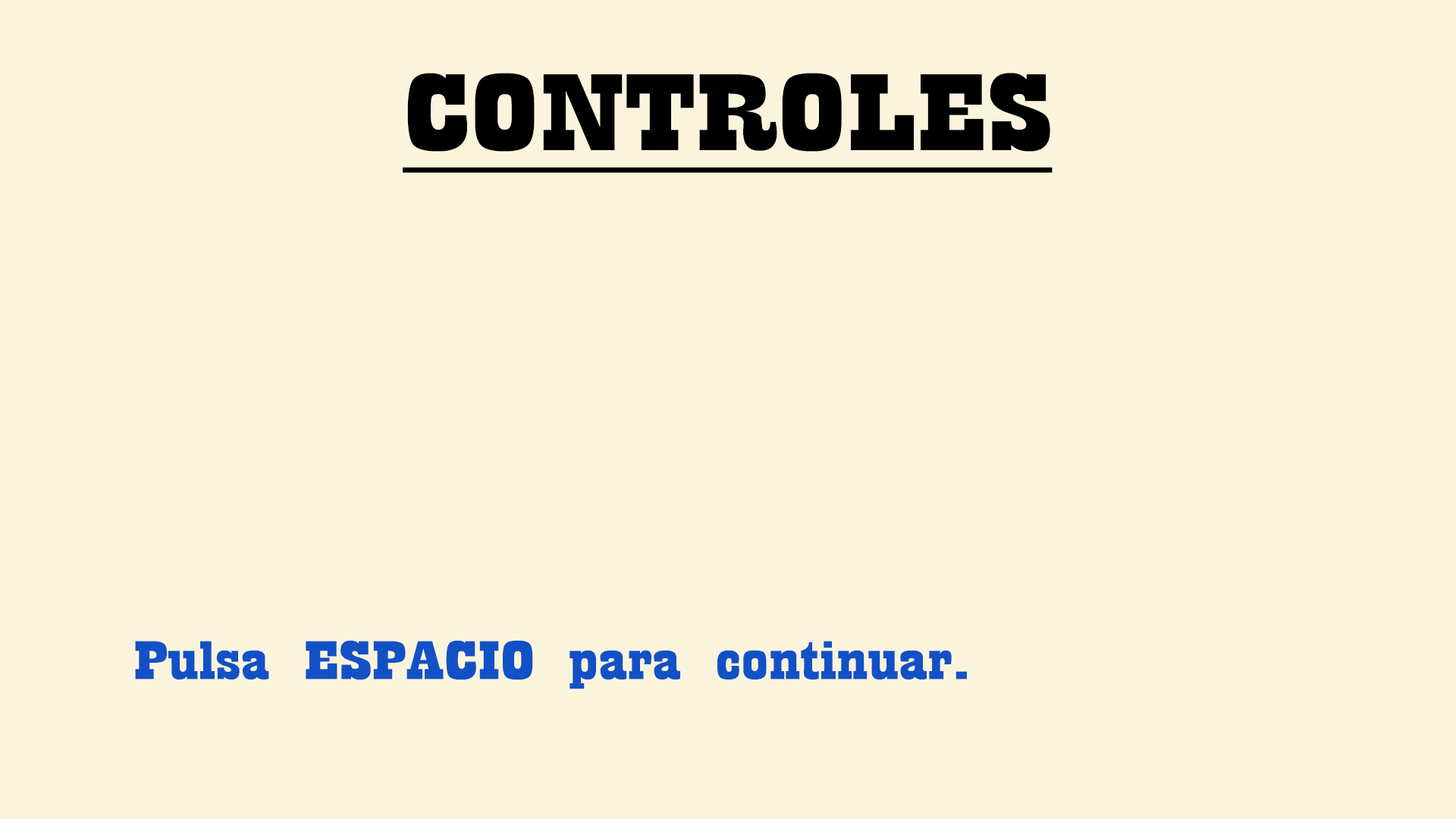
<style>
.page{position:relative;width:1456px;height:819px;background:#fbf4dd}
.page>*{position:absolute;margin:0}
.t1{font:113.7px "Playbill";color:#000000;text-decoration:underline;scale:2 1}
.t2{font:56.9px "Playbill";color:#1251c5;scale:2 1}
</style>
<div class="page">
<p class="t1" style="left:403px;top:73px;width:650px;height:100px">CONTROLES</p>
<p class="t2" style="left:135px;top:640px;width:832px;height:49px">Pulsa ESPACIO para continuar.</p>
</div>
